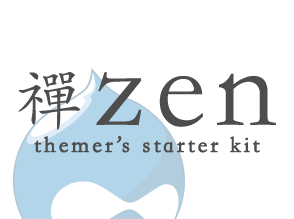
<style>
.page{position:relative;width:294px;height:219px;background:#ffffff}
.page>*{position:absolute;margin:0}
.t1{font:69.6px "STKaiti";letter-spacing:-0.025em;color:#4d4d4d}
.t2{font:121.8px "STKaiti";letter-spacing:0.075em;color:#4d4d4d}
.t3{font:22.6px "STKaiti";letter-spacing:0.118em;color:#4d4d4d;font-weight:bold}
</style>
<div class="page">
<p class="t1" style="left:18px;top:72px;width:62px;height:58px">禪</p>
<p class="t2" style="left:96px;top:72px;width:180px;height:55px">zen</p>
<p class="t3" style="left:34px;top:136px;width:226px;height:17px">themer’s starter kit</p>
</div>
